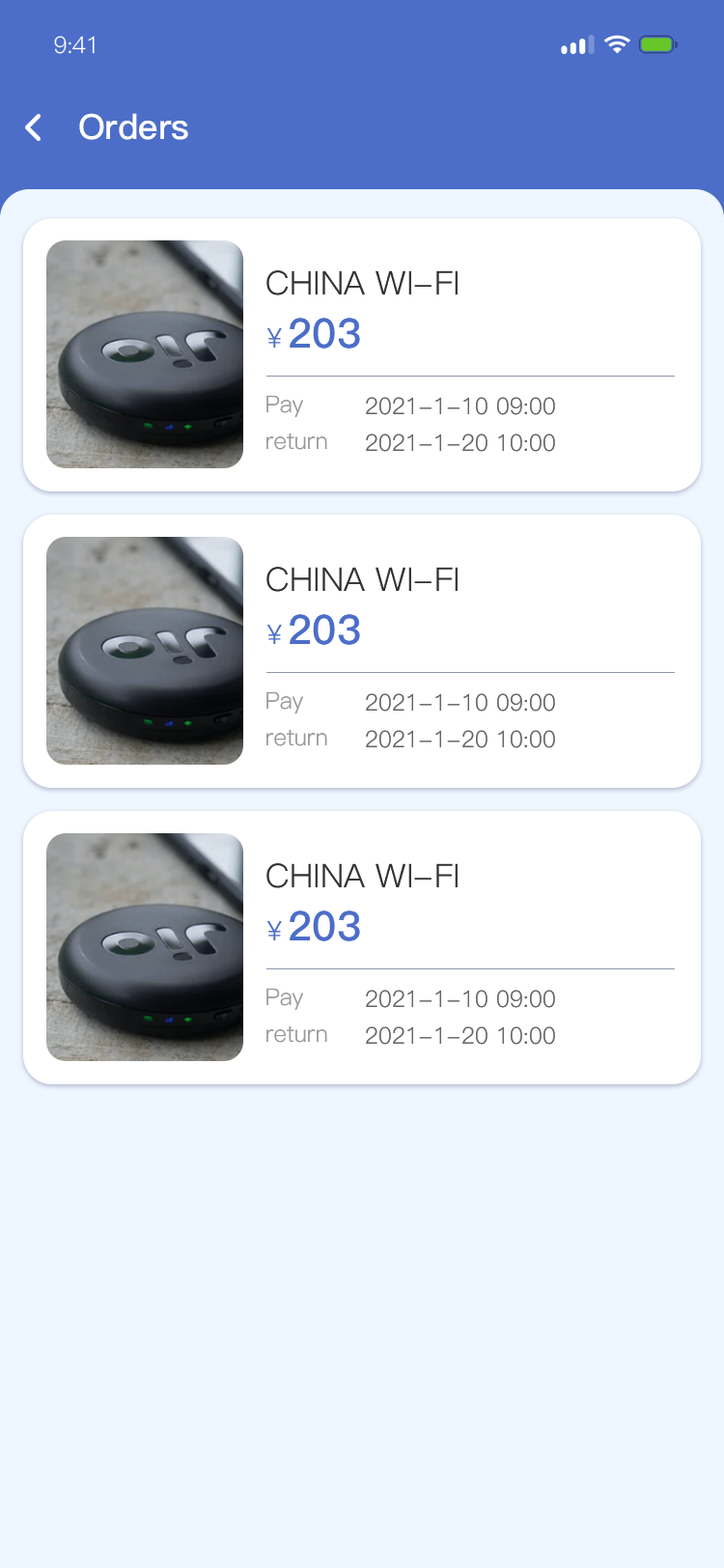
<style>
.page{position:relative;width:724px;height:1568px;background:#eef6ff}
.page>*{position:absolute;margin:0}
.t1{font:23.2px "PingFang-SC-Regular";letter-spacing:-0.025em;color:#ffffff}
.t2{font:34.8px "PingFang-SC-Bold";color:#ffffff}
.t3{font:34.8px "PingFang-SC-Bold";color:#ffffff;text-transform:uppercase}
.t4{font:32.8px "PingFang-SC-Regular";color:#333333;text-transform:uppercase}
.t5{font:40.6px "PingFang-SC-Bold";color:#4c6ec8}
.t6{font:27px "PingFang-SC-Regular";color:#4c6ec8}
.t7{font:23.2px "PingFang-SC-Regular";color:#999999}
.t8{font:23.2px "PingFang-SC-Regular";color:#666666}
</style>
<div class="page">
<p class="t1" style="left:54px;top:36px;width:41px;height:18px">9:41</p>
<p class="t2" style="left:79px;top:113px;width:109px;height:27px"><span class="t3">o</span>rders</p>
<p class="t4" style="left:266px;top:270px;width:192px;height:25px">china WI-FI</p>
<p class="t5" style="left:266px;top:318px;width:94px;height:31px"><span class="t6">￥</span>203</p>
<p class="t7" style="left:266px;top:395px;width:37px;height:22px">Pay</p>
<p class="t8" style="left:366px;top:397px;width:189px;height:18px">2021-1-10 09:00</p>
<p class="t7" style="left:266px;top:433px;width:61px;height:17px">return</p>
<p class="t8" style="left:366px;top:434px;width:189px;height:18px">2021-1-20 10:00</p>
<p class="t4" style="left:266px;top:567px;width:192px;height:25px">china WI-FI</p>
<p class="t5" style="left:266px;top:614px;width:94px;height:31px"><span class="t6">￥</span>203</p>
<p class="t7" style="left:266px;top:691px;width:37px;height:23px">Pay</p>
<p class="t8" style="left:366px;top:693px;width:189px;height:19px">2021-1-10 09:00</p>
<p class="t7" style="left:266px;top:729px;width:61px;height:17px">return</p>
<p class="t8" style="left:366px;top:730px;width:189px;height:18px">2021-1-20 10:00</p>
<p class="t4" style="left:266px;top:863px;width:192px;height:25px">china WI-FI</p>
<p class="t5" style="left:266px;top:910px;width:94px;height:31px"><span class="t6">￥</span>203</p>
<p class="t7" style="left:266px;top:988px;width:37px;height:22px">Pay</p>
<p class="t8" style="left:366px;top:990px;width:189px;height:18px">2021-1-10 09:00</p>
<p class="t7" style="left:266px;top:1025px;width:61px;height:18px">return</p>
<p class="t8" style="left:366px;top:1026px;width:189px;height:19px">2021-1-20 10:00</p>
</div>
